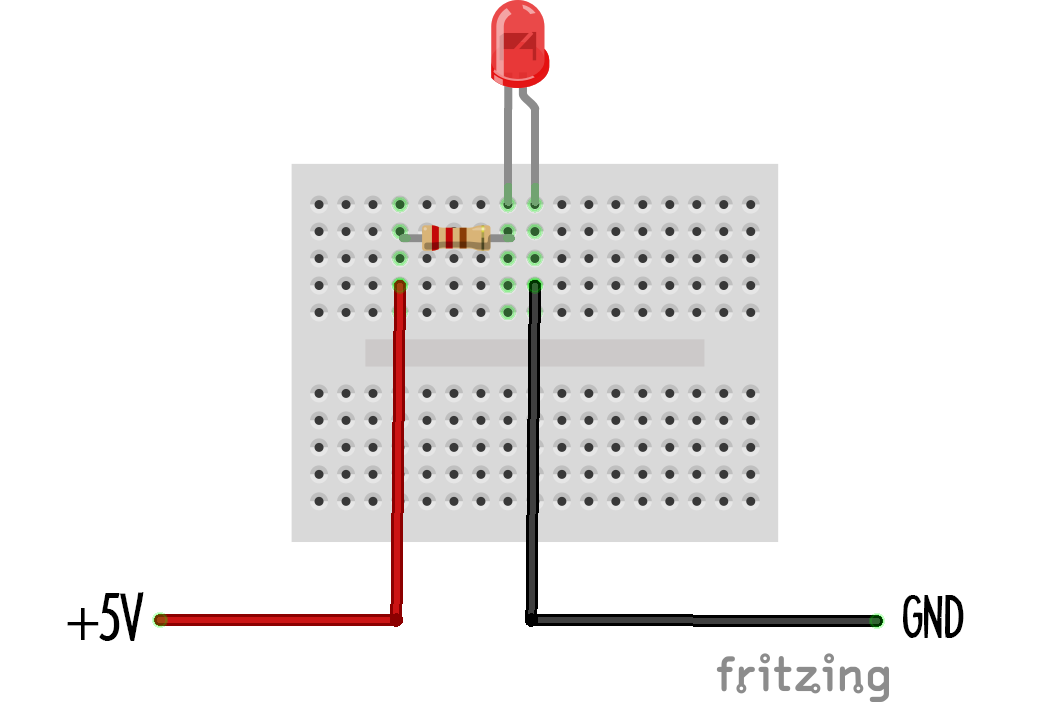
<style>
.page{position:relative;width:1037px;height:702px;background:#ffffff}
.page>*{position:absolute;margin:0}
.t1{font:60px "HeadlineTwoHPLHS";color:#000000}
.t2{font:60px "MyriadPro-Regular";color:#000000}
.t3{font:52.5px "HeadlineTwoHPLHS";color:#000000}
</style>
<div class="page">
<p class="t1" style="left:67px;top:592px;width:77px;height:49px"><span class="t2">+</span>5V</p>
<p class="t3" style="left:903px;top:595px;width:61px;height:43px">GND</p>
</div>
